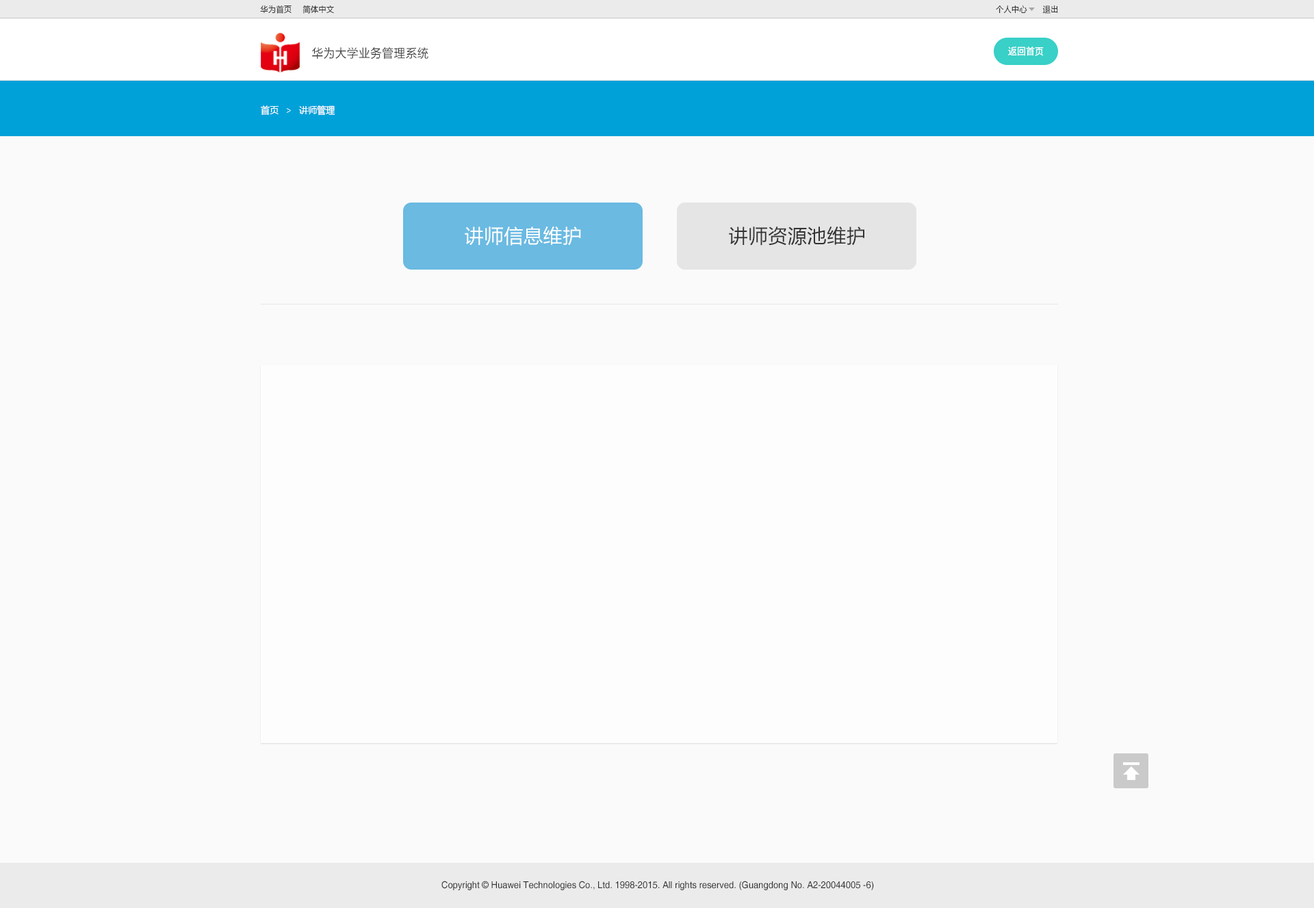
<style>
.page{position:relative;width:1314px;height:908px;background:#fafafa}
.page>*{position:absolute;margin:0}
.t1{font:8.2px "MicrosoftYaHei";letter-spacing:0.025em;color:#333333;scale:0.93 1}
.t2{font:12.3px "FZLTXHK";letter-spacing:0.025em;color:#333333;scale:0.93 1}
.t3{font:9.6px "SourceHanSansCN-Regular";color:#ffffff;scale:0.93 1}
.t4{font:9.6px "MicrosoftYaHei";color:#ffffff;scale:0.93 1}
.t5{font:19.2px "MicrosoftYaHei";letter-spacing:0.025em;color:#ffffff}
.t6{font:19.2px "MicrosoftYaHei";letter-spacing:0.025em;color:#333333}
.t7{font:9.6px "Helvetica";color:#333333;scale:0.93 1}
</style>
<div class="page">
<p class="t1" style="left:260px;top:5px;width:31px;height:9px">华为首页</p>
<p class="t1" style="left:302px;top:5px;width:32px;height:9px">简体中文</p>
<p class="t1" style="left:995px;top:5px;width:32px;height:8px">个人中心</p>
<p class="t1" style="left:1042px;top:5px;width:16px;height:9px">退出</p>
<p class="t2" style="left:312px;top:47px;width:116px;height:12px">华为大学业务管理系统</p>
<p class="t3" style="left:1008px;top:47px;width:35px;height:9px">返回首页</p>
<p class="t4" style="left:261px;top:105px;width:17px;height:10px">首页</p>
<p class="t4" style="left:299px;top:105px;width:36px;height:11px">讲师管理</p>
<p class="t5" style="left:465px;top:226px;width:116px;height:20px">讲师信息维护</p>
<p class="t6" style="left:729px;top:226px;width:135px;height:20px">讲师资源池维护</p>
<p class="t7" style="left:441px;top:880px;width:433px;height:10px">Copyright © Huawei Technologies Co., Ltd. 1998-2015. All rights reserved. (Guangdong No. A2-20044005 -6)</p>
</div>
